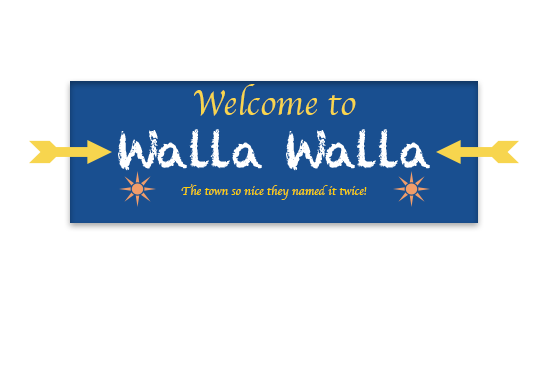
<style>
.page{position:relative;width:550px;height:367px;background:#ffffff}
.page>*{position:absolute;margin:0}
.t1{font:36px "Apple-Chancery";color:#f7d54e}
.t2{font:12px "Apple-Chancery";color:#ffd200}
</style>
<div class="page">
<p class="t1" style="left:194px;top:84px;width:162px;height:32px">Welcome to</p>
<p class="t2" style="left:181px;top:184px;width:186px;height:16px">The town so nice they named it twice!</p>
</div>
